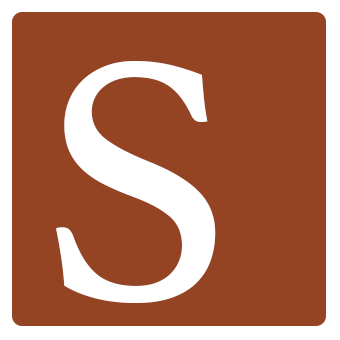
<style>
.page{position:relative;width:340px;height:340px;background:#944323}
.page>*{position:absolute;margin:0}
.t1{font:360px "Athelas-Regular";color:#ffffff}
</style>
<div class="page">
<p class="t1" style="left:56px;top:61px;width:160px;height:242px">S</p>
</div>
